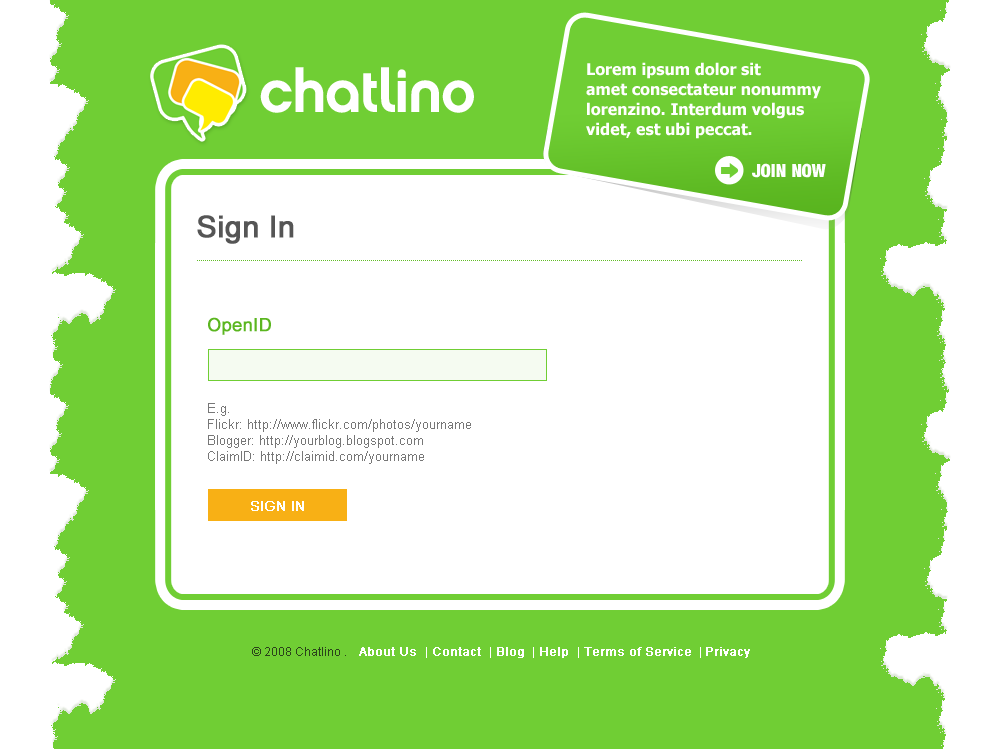
<style>
.page{position:relative;width:1000px;height:749px;background:#ffffff}
.page>*{position:absolute;margin:0}
.t1{font:16px/20px "Tahoma-Bold";color:#ffffff}
.t2{font:60px "Chalet-NewYorkNineteenSeventy";letter-spacing:-0.025em;color:#ffffff}
.t3{font:18px "Harvest";color:#ffffff;text-transform:uppercase}
.t4{font:30px "ArialMT";color:#555555;font-weight:bold}
.t5{font:18px "ArialMT";color:#5bb620;font-weight:bold}
.t6{font:13px/16px "ArialMT";color:#777777}
.t7{font:14px "ArialMT";color:#ffffff;text-transform:uppercase;font-weight:bold}
.t8{font:12px "ArialMT";color:#2b431b}
.t9{font:12px "ArialMT";color:#ffffff;font-weight:bold}
.t10{font:12px "ArialMT";color:#ffffff}
</style>
<div class="page">
<p class="t1" style="left:586px;top:62px;width:235px;height:77px">Lorem ipsum dolor sit <br>amet consectateur nonummy <br>lorenzino. Interdum volgus <br>videt, est ubi peccat.</p>
<p class="t2" style="left:260px;top:67px;width:214px;height:46px">chatlino</p>
<p class="t3" style="left:752px;top:163px;width:74px;height:15px">join now</p>
<p class="t4" style="left:197px;top:215px;width:97px;height:29px">Sign In</p>
<p class="t5" style="left:208px;top:317px;width:63px;height:18px">OpenID</p>
<p class="t6" style="left:208px;top:403px;width:263px;height:61px">E.g.<br>Flickr: http://www.flickr.com/photos/yourname<br>Blogger: http://yourblog.blogspot.com<br>ClaimID: http://claimid.com/yourname</p>
<p class="t7" style="left:251px;top:501px;width:53px;height:10px">sign in</p>
<p class="t8" style="left:252px;top:647px;width:498px;height:11px">© 2008 Chatlino .<span class="t9">   About Us  </span><span class="t10">|</span><span class="t9"> Contact  </span><span class="t10">|</span><span class="t9"> Blog </span><span class="t10"> |</span><span class="t9"> Help  </span><span class="t10">|</span><span class="t9"> Terms of Service </span><span class="t10"> | </span><span class="t9">Privacy</span></p>
</div>
